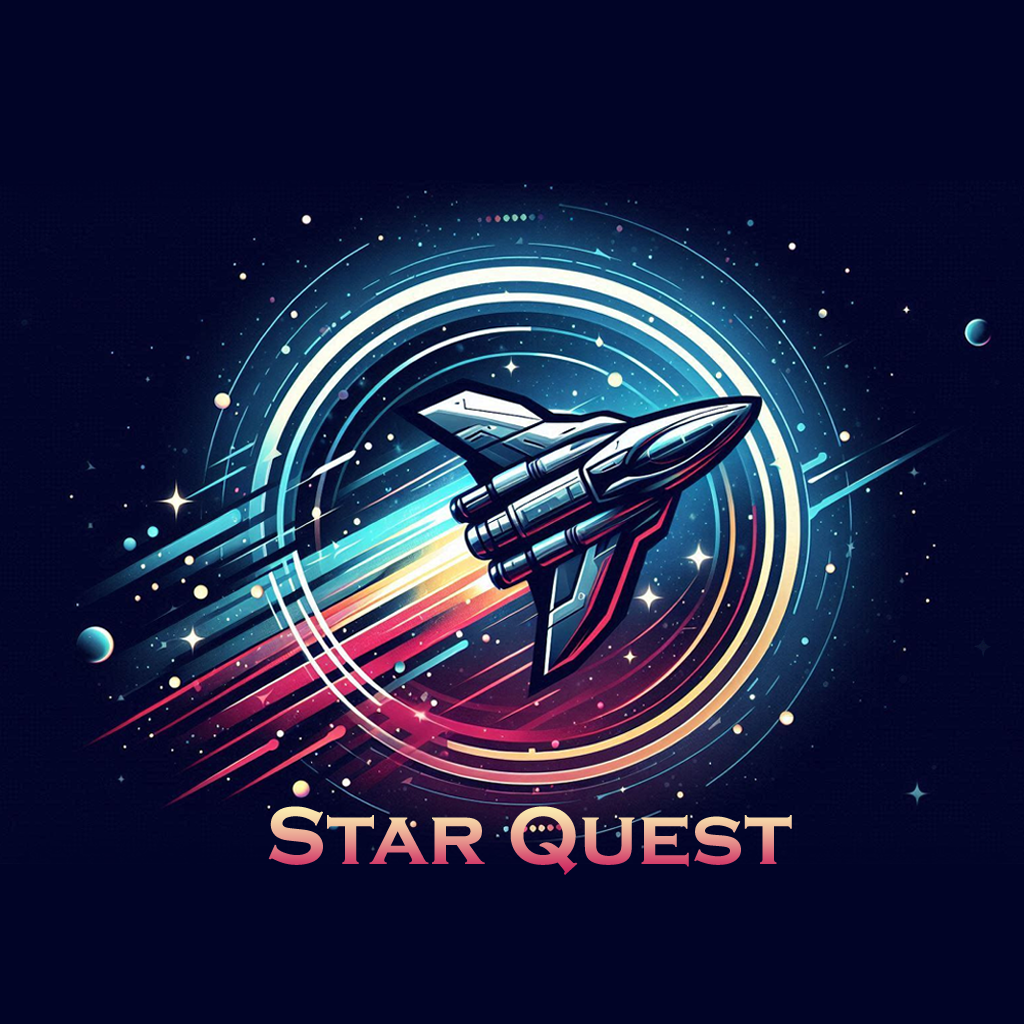
<style>
.page{position:relative;width:1024px;height:1024px;background:#010427}
.page>*{position:absolute;margin:0}
.t1{font:84.4px "CopperplateGothic-Bold"}
</style>
<div class="page">
<p class="t1" style="left:268px;top:806px;width:524px;height:69px">Star Quest</p>
</div>
